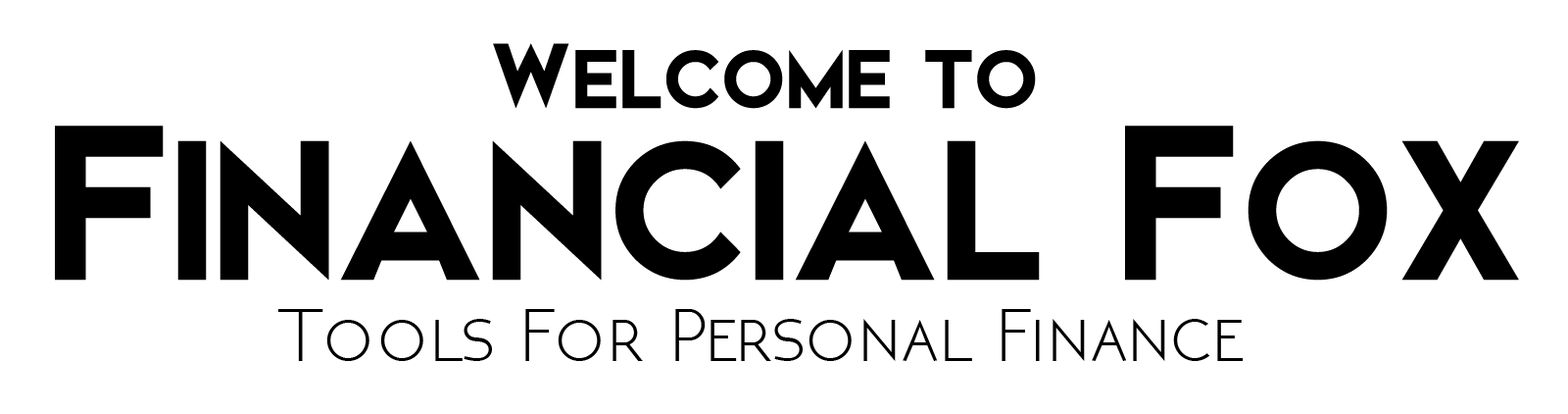
<style>
.page{position:relative;width:1568px;height:414px;background:#ffffff}
.page>*{position:absolute;margin:0}
.t1{font:122.4px "Elkwood";color:#000000}
.t2{font:293.7px "Elkwood";color:#000000}
.t3{font:78.4px "NEOTERIC";color:#000000}
</style>
<div class="page">
<p class="t1" style="left:493px;top:43px;width:543px;height:66px">Welcome to</p>
<p class="t2" style="left:55px;top:125px;width:1464px;height:155px">Financial Fox</p>
<p class="t3" style="left:278px;top:309px;width:966px;height:52px">Tools For Personal Finance</p>
</div>
